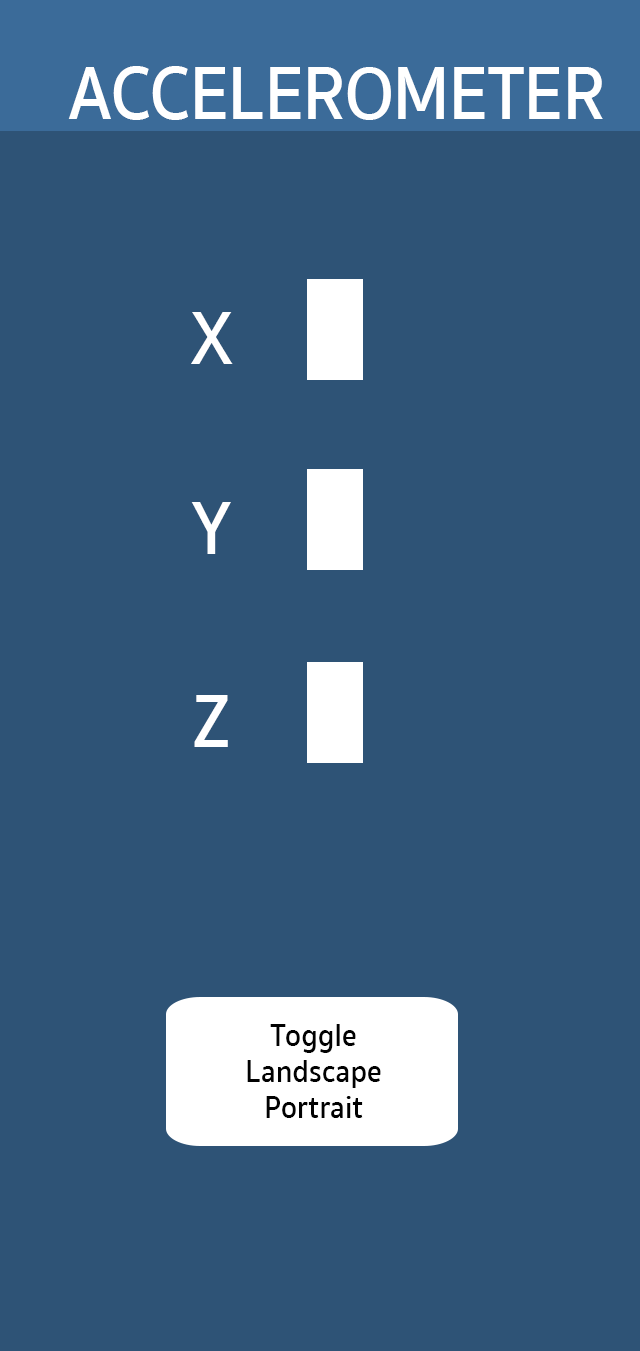
<style>
.page{position:relative;width:640px;height:1351px;background:#2e5376}
.page>*{position:absolute;margin:0}
.t1{font:76.6px "SukhumvitSet-SemiBold";color:#ffffff;scale:0.91 1}
.t2{font:32.2px/36px "SukhumvitSet-SemiBold";color:#010101;scale:0.91 1}
</style>
<div class="page">
<p class="t1" style="left:68px;top:66px;width:535px;height:54px">ACCELEROMETER</p>
<p class="t1" style="left:191px;top:312px;width:42px;height:52px">X</p>
<p class="t1" style="left:191px;top:502px;width:40px;height:52px">Y</p>
<p class="t1" style="left:194px;top:695px;width:34px;height:52px">Z</p>
<p class="t2" style="left:247px;top:1024px;width:134px;height:94px;text-align:center">Toggle<br>Landscape<br>Portrait</p>
</div>
